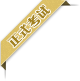
<style>
.page{position:relative;width:80px;height:81px;background:#ffffff}
.page>*{position:absolute;margin:0}
.t1{font:11px "FZCQJW--GB1-0";letter-spacing:0.1em;color:#a28121;scale:1.1 1}
</style>
<div class="page">
<p class="t1" style="left:7px;top:4px;width:43px;height:44px;rotate:-45deg">正式考试</p>
</div>
